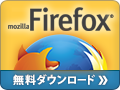
<style>
.page{position:relative;width:120px;height:90px}
.page>*{position:absolute;margin:0}
.t1{font:8px "MetaBook-Roman"}
.t2{font:11px "KozGoPro-Heavy";color:#ffffff}
.t3{font:11px "KozGoPro-Heavy";color:#ffffff;scale:0.9 1}
.t4{font:20px "KozGoPro-Bold";color:#ffffff}
</style>
<div class="page">
<p class="t1" style="left:110px;top:14px;width:4px;height:4px">®</p>
<p class="t2" style="left:13px;top:74px;width:82px;height:11px">無料ダウンロ<span class="t3">ー</span>ド</p>
<p class="t4" style="left:98px;top:75px;width:10px;height:10px">»</p>
</div>
